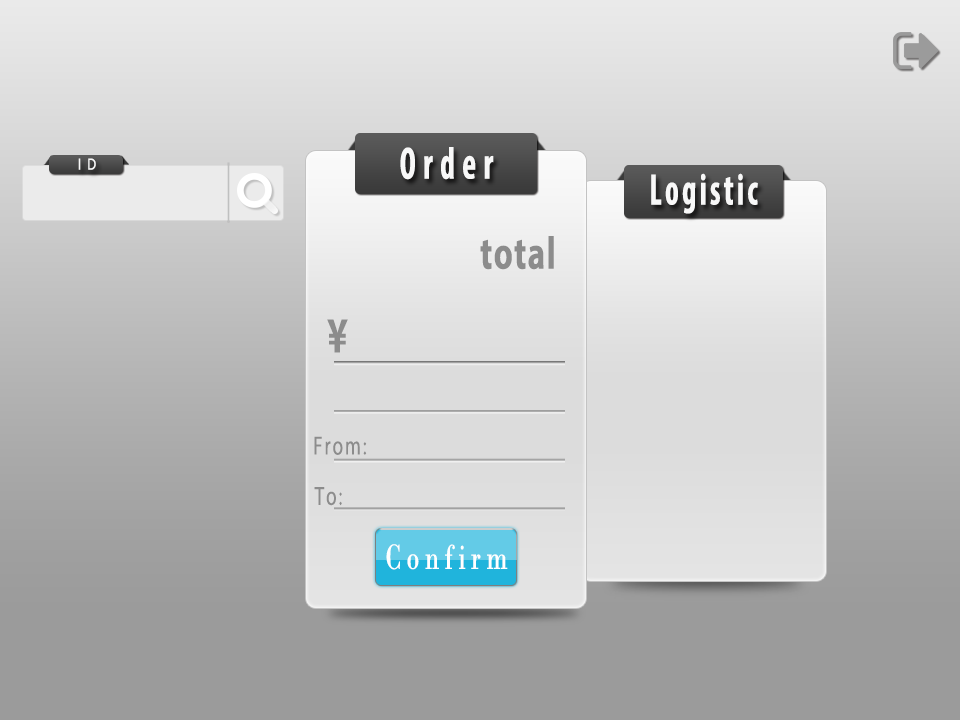
<style>
.page{position:relative;width:960px;height:720px}
.page>*{position:absolute;margin:0}
.t1{font:45.7px "MyriadPro-BoldCond";letter-spacing:0.22em;color:#ffffff;scale:0.73 1}
.t2{font:14.7px "MicrosoftYaHei";letter-spacing:0.1em;color:#ffffff;scale:0.81 1}
.t3{font:44.4px "MyriadPro-BoldCond";letter-spacing:0.1em;color:#ffffff;scale:0.73 1}
.t4{font:45.7px "MyriadPro-Bold";letter-spacing:0.04em;color:#8c8c8c;scale:0.73 1}
.t5{font:50.3px "MyriadPro-Bold";letter-spacing:0.04em;color:#8c8c8c;scale:0.73 1}
.t6{font:26.3px "MyriadPro-Regular";letter-spacing:0.1em;color:#8c8c8c;scale:0.73 1}
.t7{font:36.6px "BodoniMT";letter-spacing:0.2em;color:#ffffff;scale:0.73 1}
</style>
<div class="page">
<p class="t1" style="left:400px;top:147px;width:94px;height:33px">Order</p>
<p class="t2" style="left:78px;top:158px;width:18px;height:12px">I D</p>
<p class="t3" style="left:651px;top:173px;width:107px;height:41px">Logistic</p>
<p class="t4" style="left:480px;top:236px;width:74px;height:34px">total</p>
<p class="t5" style="left:327px;top:319px;width:21px;height:34px">¥</p>
<p class="t6" style="left:314px;top:436px;width:53px;height:19px">From:</p>
<p class="t6" style="left:314px;top:487px;width:28px;height:19px">To:</p>
<p class="t7" style="left:386px;top:544px;width:122px;height:26px">Confirm</p>
</div>
